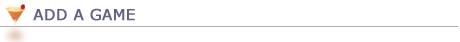
<style>
.page{position:relative;width:460px;height:42px;background:#ffffff}
.page>*{position:absolute;margin:0}
.t1{font:15px "Verdana";color:#636388;font-weight:bold}
</style>
<div class="page">
<p class="t1" style="left:33px;top:8px;width:102px;height:13px">ADD A GAME</p>
</div>
